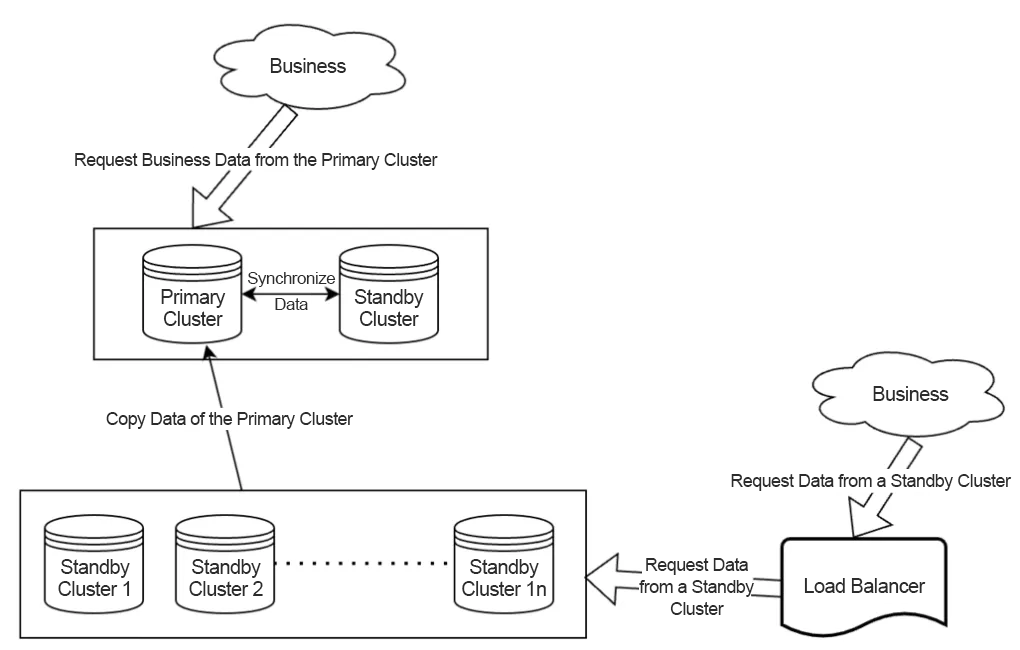
<style>
.page{position:relative;width:1020px;height:650px;background:#ffffff}
.page>*{position:absolute;margin:0}
.t1{font:20px "ArialMT";letter-spacing:-0.03em;color:#2c2c2c}
.t2{font:18px "ArialMT";letter-spacing:-0.03em;color:#2c2c2c}
.t3{font:17px/26px "ArialMT";letter-spacing:-0.03em;color:#2c2c2c}
.t4{font:20px/22px "ArialMT";letter-spacing:-0.03em;color:#2c2c2c}
.t5{font:18px/22px "ArialMT";letter-spacing:-0.03em;color:#2c2c2c}
</style>
<div class="page">
<p class="t1" style="left:270px;top:58px;width:76px;height:15px">Business</p>
<p class="t2" style="left:75px;top:153px;width:363px;height:17px">Request Business Data from the Primary Cluster</p>
<p class="t3" style="left:248px;top:272px;width:88px;height:38px;text-align:center">Synchronize Data</p>
<p class="t4" style="left:161px;top:289px;width:65px;height:37px;text-align:center">Primary Cluster</p>
<p class="t4" style="left:354px;top:289px;width:70px;height:37px;text-align:center">Standby Cluster</p>
<p class="t1" style="left:873px;top:386px;width:76px;height:15px">Business</p>
<p class="t2" style="left:106px;top:412px;width:248px;height:17px">Copy Data of the Primary Cluster</p>
<p class="t2" style="left:731px;top:474px;width:281px;height:17px">Request Data from a Standby Cluster</p>
<p class="t5" style="left:639px;top:558px;width:115px;height:57px;text-align:center">Request Data from a Standby Cluster</p>
<p class="t4" style="left:58px;top:559px;width:72px;height:37px;text-align:center">Standby Cluster 1</p>
<p class="t4" style="left:189px;top:559px;width:74px;height:37px;text-align:center">Standby Cluster 2</p>
<p class="t4" style="left:462px;top:559px;width:84px;height:37px;text-align:center">Standby Cluster 1n</p>
<p class="t1" style="left:804px;top:578px;width:122px;height:15px">Load Balancer</p>
</div>
